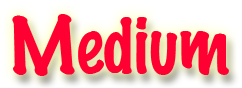
<style>
.page{position:relative;width:242px;height:88px;background:#ff0033}
.page>*{position:absolute;margin:0}
.t1{font:71.6px "MarkerFelt-Thin";color:#ff0033}
</style>
<div class="page">
<p class="t1" style="left:12px;top:14px;width:217px;height:62px">Medium</p>
<p class="t1" style="left:12px;top:14px;width:217px;height:62px">Medium</p>
</div>
